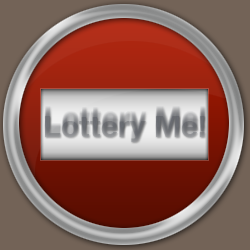
<style>
.page{position:relative;width:250px;height:250px}
.page>*{position:absolute;margin:0}
.t1{font:30px "HelveticaNeue-Bold";color:#75777b}
</style>
<div class="page">
<p class="t1" style="left:45px;top:116px;width:160px;height:26px">Lottery Me!</p>
</div>
